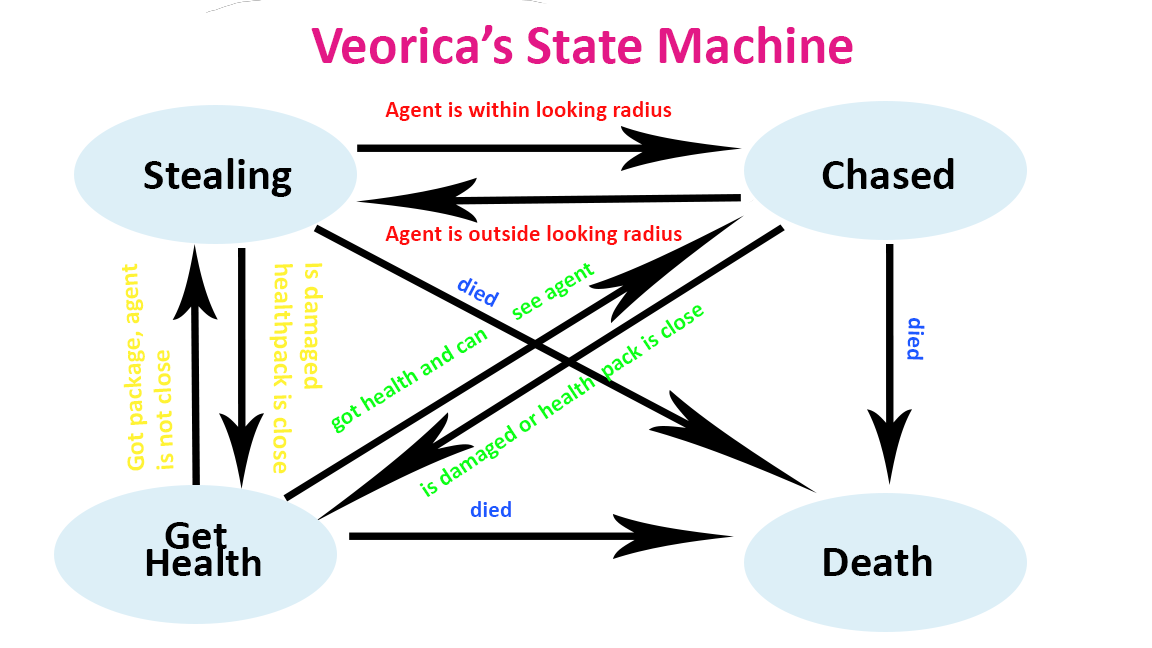
<style>
.page{position:relative;width:1152px;height:648px;background:#ffffff}
.page>*{position:absolute;margin:0}
.t1{font:55.1px "Calibri-Bold";color:#e31886}
.t2{font:23.4px "Calibri-Bold";color:#ff0d0d}
.t3{font:45.1px "Calibri-Bold";color:#000000}
.t4{font:25.8px/14.7px "Calibri-Bold";color:#fff335}
.t5{font:26.7px/15.2px "Calibri-Bold";color:#fff335}
.t6{font:23.4px "Calibri-Bold";color:#0cff17}
.t7{font:23.4px "Calibri-Bold";color:#1d58ff}
.t8{font:43.4px/13.3px "Calibri-Bold";color:#000000}
</style>
<div class="page">
<p class="t1" style="left:311px;top:25px;width:542px;height:39px">Veorica’s State Machine</p>
<p class="t2" style="left:385px;top:101px;width:287px;height:20px">Agent is within looking radius</p>
<p class="t3" style="left:144px;top:158px;width:148px;height:39px">Stealing</p>
<p class="t3" style="left:822px;top:158px;width:132px;height:31px">Chased</p>
<p class="t2" style="left:385px;top:225px;width:297px;height:20px">Agent is outside looking radius</p>
<p class="t4" style="left:122px;top:263px;width:52px;height:208px;text-align:center;rotate:-92deg">Got package, agent <br><br>is not close</p>
<p class="t5" style="left:269px;top:263px;width:54px;height:211px;rotate:90deg">Is damaged<br>  <br> healthpack is close</p>
<p class="t6" style="left:331px;top:263px;width:264px;height:171px;rotate:-31deg">got health and can      see agent</p>
<p class="t7" style="left:457px;top:278px;width:43px;height:29px;rotate:28deg">died</p>
<p class="t7" style="left:907px;top:318px;width:18px;height:42px;rotate:92deg">died</p>
<p class="t7" style="left:470px;top:501px;width:41px;height:16px">died</p>
<p class="t8" style="left:146px;top:522px;width:115px;height:54px">Get <br> <br>    Health</p>
<p class="t3" style="left:824px;top:545px;width:108px;height:31px">Death</p>
</div>
